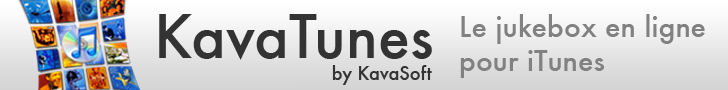
<style>
.page{position:relative;width:728px;height:90px}
.page>*{position:absolute;margin:0}
.t1{font:18px "Futura-Medium";color:#333333}
.t2{font:58px "Futura-Medium";color:#333333}
.t3{font:28px "Futura-Medium";color:#818181}
</style>
<div class="page">
<p class="t1" style="left:159px;top:14px;width:273px;height:71px"><span class="t2">KavaTunes<br></span>                                by KavaSoft</p>
<p class="t3" style="left:460px;top:14px;width:245px;height:64px">Le jukebox en ligne<br>pour iTunes</p>
</div>
